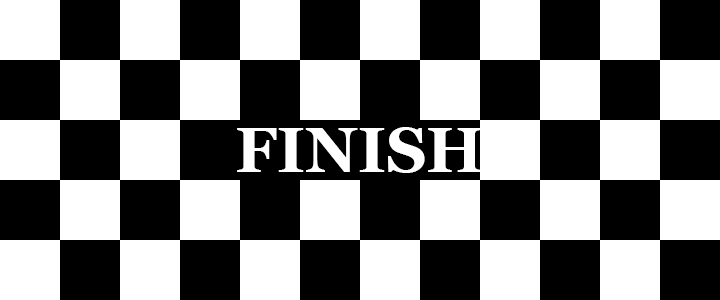
<style>
.page{position:relative;width:720px;height:300px;background:#000000}
.page>*{position:absolute;margin:0}
.t1{font:62.5px "Georgia-Bold";color:#ffffff}
</style>
<div class="page">
<p class="t1" style="left:237px;top:127px;width:245px;height:46px">FINISH</p>
</div>
